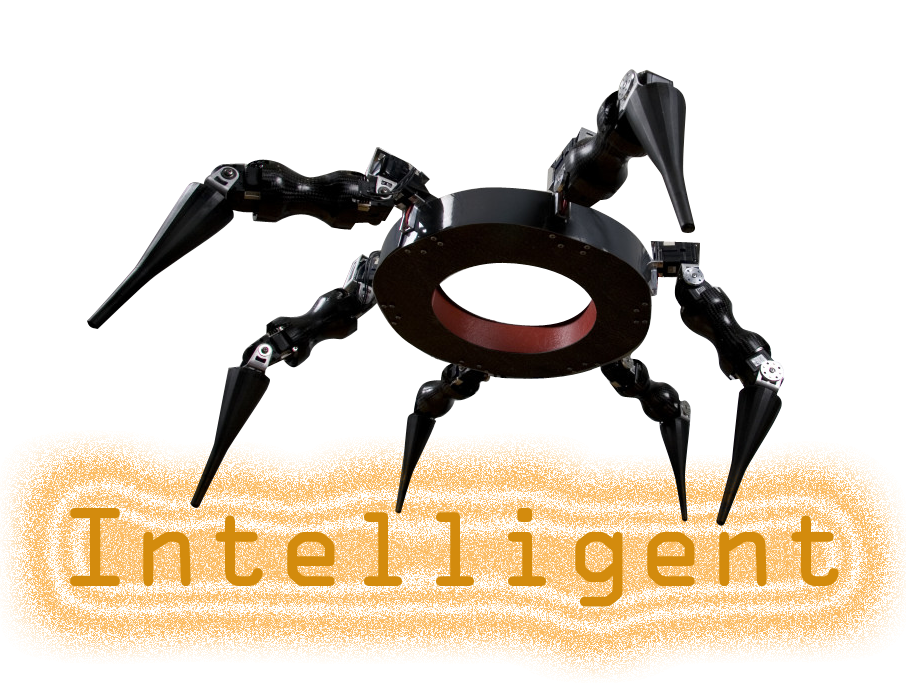
<style>
.page{position:relative;width:906px;height:683px;background:#ffffff}
.page>*{position:absolute;margin:0}
.t1{font:100px "OCRAStd";color:#d38b0d}
</style>
<div class="page">
<p class="t1" style="left:70px;top:508px;width:769px;height:99px">Intelligent</p>
</div>
